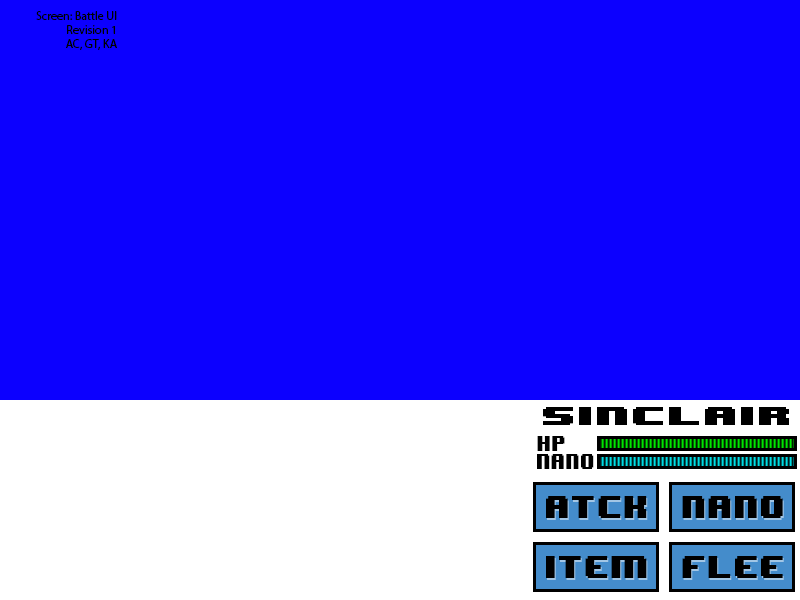
<style>
.page{position:relative;width:800px;height:600px;background:#0c00ff}
.page>*{position:absolute;margin:0}
.t1{font:12px "MyriadPro-Regular";color:#000000}
.t2{font:21px/48px "8BITWONDERNominal";color:#000000;scale:1.71 1}
.t3{font:30px/48px "MyriadPro-Regular";color:#000000}
.t4{font:18px "8BITWONDERNominal";color:#000000;scale:0.82 1}
.t5{font:26.1px "8BITWONDERNominal";color:#000000}
</style>
<div class="page">
<p class="t1" style="left:36px;top:11px;width:81px;height:39px;text-align:right">Screen: Battle UI<br>Revision 1<br>AC, GT, KA</p>
<p class="t2" style="left:543px;top:407px;width:246px;height:18px;text-align:right">SINCLAIR<br><span class="t3">jk 6hp</span></p>
<p class="t4" style="left:537px;top:436px;width:28px;height:15px">HP</p>
<p class="t4" style="left:537px;top:454px;width:57px;height:15px">NANO</p>
<p class="t5" style="left:546px;top:496px;width:101px;height:22px">ATCK</p>
<p class="t5" style="left:682px;top:496px;width:101px;height:22px">NANO</p>
<p class="t5" style="left:546px;top:556px;width:101px;height:22px">ITEM</p>
<p class="t5" style="left:682px;top:556px;width:101px;height:22px">FLEE</p>
</div>
